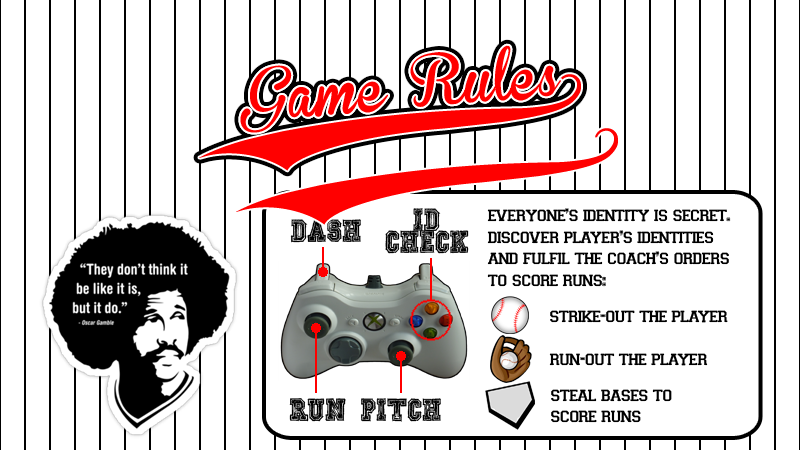
<style>
.page{position:relative;width:800px;height:450px;background:#ffffff}
.page>*{position:absolute;margin:0}
.t1{font:50px "BrannbollFet";color:#ff0101}
.t2{font:60px "BrannbollFet";color:#ff0000}
.t3{font:18px "Mickey'sSchool";color:#000000}
.t4{font:18px "Varsity-Regular";color:#000000}
</style>
<div class="page">
<p class="t1" style="left:240px;top:45px;width:321px;height:88px;rotate:-5deg">Game Rules</p>
<p class="t2" style="left:236px;top:128px;width:382px;height:97px;rotate:-7deg">9</p>
<p class="t3" style="left:385px;top:208px;width:84px;height:46px;text-align:center">ID<br>CHECK</p>
<p class="t4" style="left:487px;top:208px;width:244px;height:79px">everyone’s identity is secret.<br>discover player’s identities<br>and fulfil the coach’s orders<br>to score runs:</p>
<p class="t3" style="left:290px;top:218px;width:71px;height:25px">DASH</p>
<p class="t4" style="left:550px;top:310px;width:178px;height:13px">strike-out the player</p>
<p class="t4" style="left:549px;top:353px;width:159px;height:13px">run-out the player</p>
<p class="t4" style="left:551px;top:389px;width:121px;height:34px">steal bases to<br>score runs</p>
<p class="t3" style="left:289px;top:398px;width:57px;height:24px">RUN</p>
<p class="t3" style="left:361px;top:398px;width:80px;height:24px">PITCH</p>
</div>
